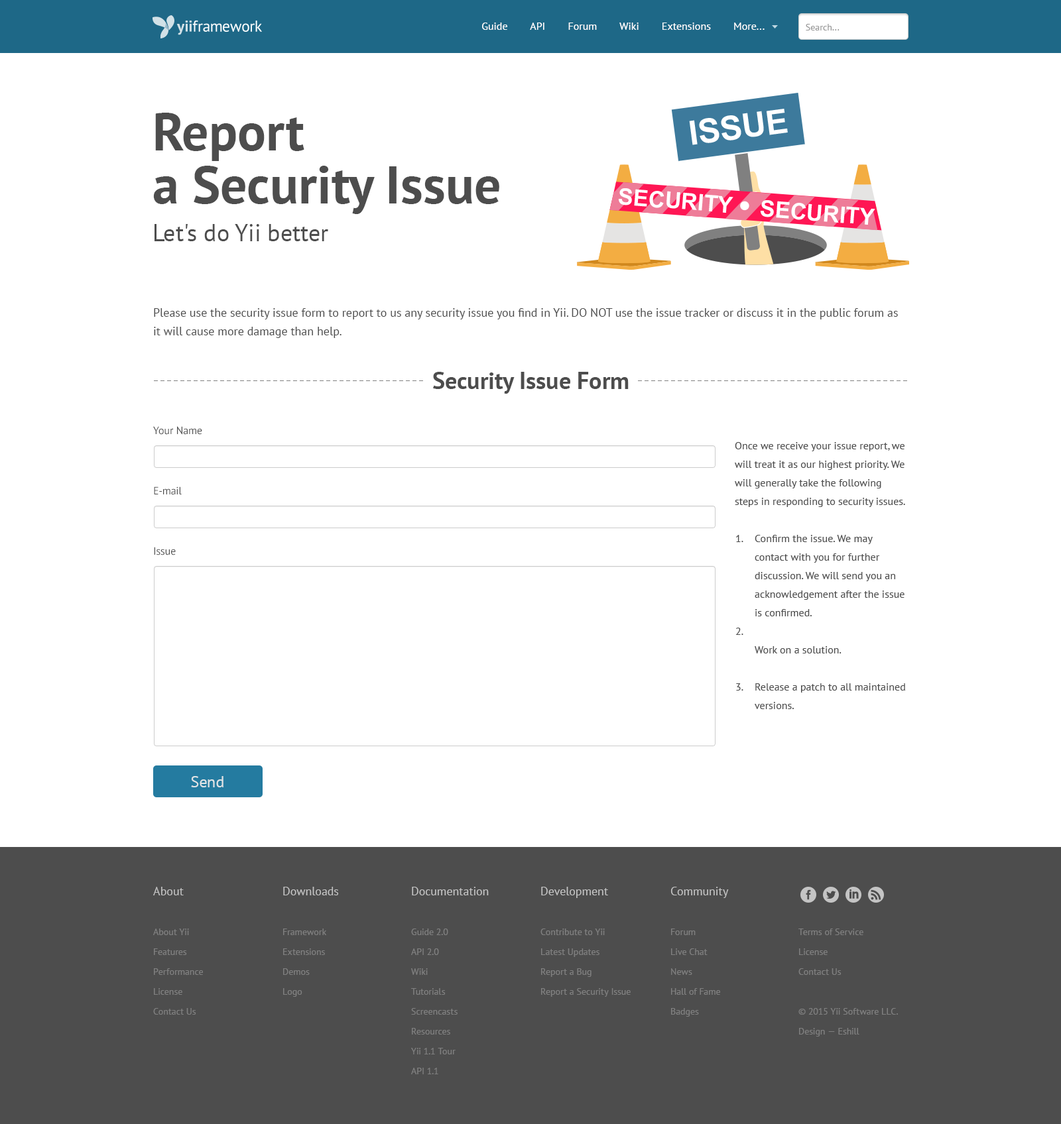
<style>
.page{position:relative;width:1061px;height:1124px;background:#ffffff}
.page>*{position:absolute;margin:0}
.t1{font:10.6px "PTSans-Regular";color:#ffffff}
.t2{font:9.3px "PTSans-Regular";color:#999999}
.t3{font:53px/53px "PTSans-Bold";color:#4d4d4d}
.t4{font:23.9px "PTSans-Regular";color:#4d4d4d}
.t5{font:11.9px/18.6px "PTSans-Regular";color:#4d4d4d}
.t6{font:23.9px "PTSans-Bold";color:#4d4d4d}
.t7{font:10.6px "PTSans-Regular";color:#4d4d4d}
.t8{font:10.6px/18.6px "PTSans-Regular";color:#4d4d4d}
.t9{font:15.9px "PTSans-Regular";color:#dfe4e6}
.t10{font:9.3px/19.9px "PTSans-Regular";color:#808080}
.t11{font:11.9px/19.9px "PTSans-Regular";color:#c4c4c4}
</style>
<div class="page">
<p class="t1" style="left:482px;top:23px;width:282px;height:7px">Guide        API        Forum        Wiki        Extensions        More...</p>
<p class="t2" style="left:805px;top:24px;width:34px;height:6px">Search...</p>
<p class="t3" style="left:153px;top:113px;width:346px;height:101px">Report <br>a Security Issue</p>
<p class="t4" style="left:154px;top:224px;width:174px;height:17px">Let's do Yii better</p>
<p class="t5" style="left:154px;top:308px;width:744px;height:30px">Please use the security issue form to report to us any security issue you find in Yii. DO NOT use the issue tracker or discuss it in the public forum as it will cause more damage than help.</p>
<p class="t6" style="left:433px;top:372px;width:195px;height:22px">Security Issue Form</p>
<p class="t7" style="left:153px;top:426px;width:49px;height:9px">Your Name</p>
<p class="t8" style="left:734px;top:442px;width:171px;height:267px">Once we receive your issue report, we will treat it as our highest priority. We will generally take the following steps in responding to security issues.<br><br>Confirm the issue. We may contact with you for further discussion. We will send you an acknowledgement after the issue is confirmed.<br><br>Work on a solution.<br><br>Release a patch to all maintained versions.</p>
<p class="t7" style="left:154px;top:487px;width:28px;height:8px">E-mail</p>
<p class="t8" style="left:735px;top:535px;width:8px;height:156px">1.<br><br><br><br><br>2.<br><br><br>3.</p>
<p class="t7" style="left:154px;top:547px;width:22px;height:9px">Issue</p>
<p class="t9" style="left:191px;top:776px;width:32px;height:12px">Send</p>
<p class="t10" style="left:153px;top:887px;width:50px;height:128px"><span class="t11">About<br></span><br>About Yii<br>Features<br>Performance<br>License<br>Contact Us</p>
<p class="t10" style="left:283px;top:887px;width:56px;height:110px"><span class="t11">Downloads<br></span><br>Framework<br>Extensions<br>Demos<br>Logo</p>
<p class="t10" style="left:411px;top:887px;width:78px;height:188px"><span class="t11">Documentation<br></span><br>Guide 2.0<br>API 2.0<br>Wiki<br>Tutorials<br>Screencasts<br>Resources<br>Yii 1.1 Tour<br>API 1.1</p>
<p class="t10" style="left:540px;top:887px;width:90px;height:110px"><span class="t11">Development<br></span><br>Contribute to Yii<br>Latest Updates<br>Report a Bug<br>Report a Security Issue</p>
<p class="t10" style="left:670px;top:887px;width:59px;height:130px"><span class="t11">Community<br></span><br>Forum<br>Live Chat<br>News<br>Hall of Fame<br>Badges</p>
<p class="t10" style="left:798px;top:929px;width:100px;height:108px">Terms of Service<br>License<br>Contact Us<br><br>© 2015 Yii Software LLC. Design — Eshill</p>
</div>
